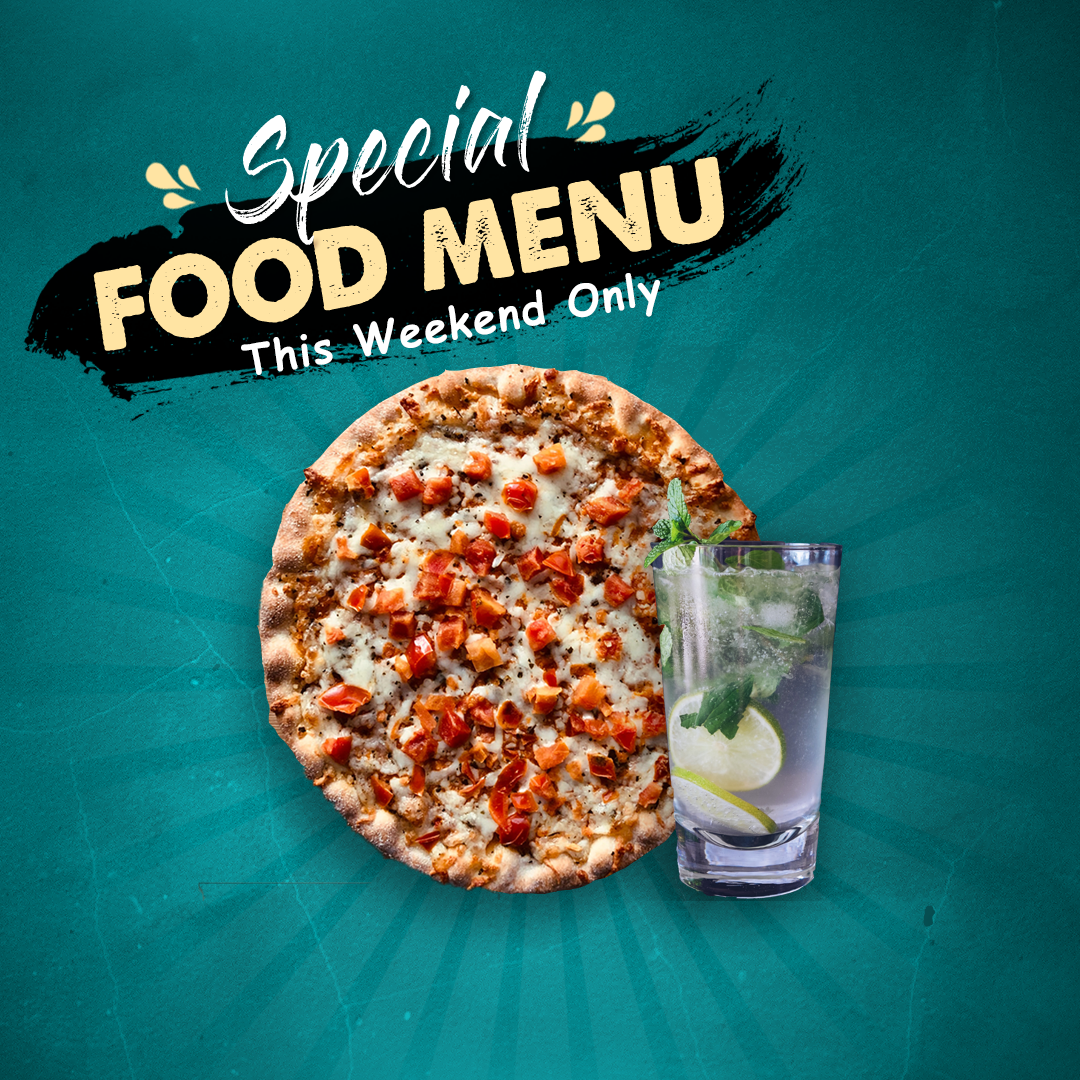
<style>
.page{position:relative;width:1080px;height:1080px}
.page>*{position:absolute;margin:0}
.t1{font:90.2px "GlossAndBloom";color:#ffffff;scale:0.95 1}
.t2{font:107.1px "ALoveofThunder";color:#ffe4a3;text-transform:uppercase;scale:0.95 1}
.t3{font:43.8px "ComicSansMS-Bold";letter-spacing:0.05em;color:#ffffff;scale:0.95 1}
</style>
<div class="page">
<p class="t1" style="left:225px;top:70px;width:321px;height:175px;rotate:-11deg">Special</p>
<p class="t2" style="left:93px;top:156px;width:632px;height:195px;rotate:-11deg">food menu</p>
<p class="t3" style="left:241px;top:273px;width:419px;height:102px;rotate:-10deg">This Weekend Only</p>
</div>
